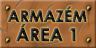
<style>
.page{position:relative;width:96px;height:48px}
.page>*{position:absolute;margin:0}
.t1{font:16px/17.3px "CenturyGothic-Bold";letter-spacing:-0.015em;text-transform:uppercase;font-weight:bold}
.t2{font:18px/19.3px "CenturyGothic-Bold";letter-spacing:-0.015em;text-transform:uppercase;font-weight:bold}
</style>
<div class="page">
<p class="t1" style="left:7px;top:6px;width:80px;height:36px;text-align:center">ARMAZÉM<br><span class="t2">ÁREA 1</span></p>
</div>
